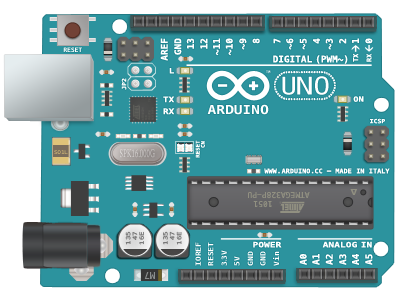
<style>
.page{position:relative;width:400px;height:300px;background:#2c939e}
.page>*{position:absolute;margin:0}
.t1{font:9.3px "Menlo-Bold";color:#ffffff}
.t2{font:6.2px "Menlo-Bold";color:#ffffff}
.t3{font:6.8px "Menlo-Bold";color:#ffffff}
.t4{font:5.8px "Menlo-Bold";color:#ffffff;scale:1.12 1}
.t5{font:7.2px "Menlo-Bold";color:#ffffff;scale:1.21 1}
.t6{font:3.7px "Menlo-Bold"}
.t7{font:24.4px "Menlo-Regular";color:#ffffff;scale:1.12 1}
.t8{font:2.5px "Menlo-Regular";color:#545552}
.t9{font:7.8px "Menlo-Bold";color:#ffffff;scale:1.2 1}
.t10{font:2.5px "Menlo-Regular";color:#575855}
.t11{font:2.5px "Menlo-Regular";color:#525250}
.t12{font:12.3px "Menlo-Bold";color:#ffffff;scale:1.19 1}
.t13{font:2.5px "Menlo-Regular";color:#545451}
.t14{font:5px "Menlo-Regular";scale:1.15 1}
.t15{font:11.8px "MinionPro-Regular";scale:0.59 1}
.t16{font:5.1px "Menlo-Bold";color:#ffffff;scale:1.12 1}
.t17{font:6.4px "Menlo-Bold";color:#ffffff;scale:1.07 1}
.t18{font:7.9px "Menlo-Regular";color:#919081}
.t19{font:5.7px "Menlo-Regular";scale:1.27 1}
.t20{font:7.2px "Menlo-Bold";color:#ffffff;scale:1.1 1}
.t21{font:7.5px "Menlo-Bold";color:#ffffff;scale:1.28 1}
.t22{font:8.8px "Menlo-Regular";color:#8a8e8e}
</style>
<div class="page">
<p class="t1" style="left:160px;top:38px;width:8px;height:23px;rotate:-90deg">AREF</p>
<p class="t1" style="left:174px;top:38px;width:8px;height:17px;rotate:-90deg">GND</p>
<p class="t1" style="left:186px;top:38px;width:8px;height:11px;rotate:-90deg">13</p>
<p class="t1" style="left:200px;top:38px;width:8px;height:11px;rotate:-90deg">12</p>
<p class="t1" style="left:213px;top:38px;width:7px;height:18px;rotate:-90deg">~11</p>
<p class="t1" style="left:225px;top:38px;width:8px;height:18px;rotate:-90deg">~10</p>
<p class="t1" style="left:239px;top:38px;width:8px;height:12px;rotate:-90deg">~9</p>
<p class="t1" style="left:252px;top:38px;width:8px;height:6px;rotate:-90deg">8</p>
<p class="t1" style="left:273px;top:38px;width:8px;height:6px;rotate:-90deg">7</p>
<p class="t1" style="left:286px;top:38px;width:8px;height:12px;rotate:-90deg">~6</p>
<p class="t1" style="left:299px;top:38px;width:8px;height:12px;rotate:-90deg">~5</p>
<p class="t1" style="left:313px;top:38px;width:7px;height:6px;rotate:-90deg">4</p>
<p class="t1" style="left:325px;top:38px;width:8px;height:12px;rotate:-90deg">~3</p>
<p class="t1" style="left:339px;top:38px;width:8px;height:6px;rotate:-90deg">2</p>
<p class="t1" style="left:352px;top:38px;width:7px;height:5px;rotate:-90deg">1</p>
<p class="t1" style="left:365px;top:38px;width:8px;height:6px;rotate:-90deg">0</p>
<p class="t2" style="left:63px;top:47px;width:19px;height:5px">RESET</p>
<p class="t3" style="left:353px;top:53px;width:6px;height:9px;rotate:-90deg">TX</p>
<p class="t3" style="left:366px;top:53px;width:6px;height:9px;rotate:-90deg">RX</p>
<p class="t1" style="left:273px;top:55px;width:39px;height:8px">DIGITAL</p>
<p class="t1" style="left:316px;top:55px;width:32px;height:9px">(PWM~)</p>
<p class="t4" style="left:121px;top:78px;width:6px;height:12px;rotate:-90deg">JP2</p>
<p class="t5" style="left:169px;top:68px;width:5px;height:6px">L</p>
<p class="t6" style="left:266px;top:70px;width:5px;height:4px">TM</p>
<p class="t7" style="left:282px;top:76px;width:47px;height:19px">UNO</p>
<p class="t8" style="left:148px;top:98px;width:3px;height:22px;rotate:-90deg">ROBOTS      TM</p>
<p class="t9" style="left:163px;top:96px;width:12px;height:7px">TX</p>
<p class="t5" style="left:353px;top:96px;width:11px;height:6px">ON</p>
<p class="t10" style="left:141px;top:107px;width:3px;height:14px;rotate:-90deg">MEGA32U4</p>
<p class="t11" style="left:151px;top:107px;width:3px;height:13px;rotate:-90deg">BIG DATA</p>
<p class="t9" style="left:163px;top:108px;width:12px;height:7px">RX</p>
<p class="t12" style="left:207px;top:104px;width:62px;height:11px">ARDUINO</p>
<p class="t13" style="left:145px;top:115px;width:3px;height:5px;rotate:-90deg">RBD</p>
<p class="t4" style="left:370px;top:118px;width:15px;height:6px">ICSP</p>
<p class="t14" style="left:54px;top:150px;width:14px;height:4px">SO1L</p>
<p class="t15" style="left:120px;top:149px;width:35px;height:9px">SPK16.000G</p>
<p class="t16" style="left:195px;top:140px;width:5px;height:18px;rotate:-90deg">RESET</p>
<p class="t16" style="left:200px;top:141px;width:5px;height:7px;rotate:-90deg">CN</p>
<p class="t17" style="left:264px;top:168px;width:13px;height:6px">WWW</p>
<p class="t17" style="left:281px;top:168px;width:30px;height:6px">ARDUINO</p>
<p class="t17" style="left:314px;top:168px;width:9px;height:6px">CC</p>
<p class="t17" style="left:335px;top:168px;width:17px;height:6px">MADE</p>
<p class="t17" style="left:356px;top:168px;width:9px;height:6px">IN</p>
<p class="t17" style="left:369px;top:168px;width:21px;height:6px">ITALY</p>
<p class="t18" style="left:248px;top:192px;width:62px;height:7px;rotate:180deg">ATMEGA328P-PU</p>
<p class="t18" style="left:253px;top:201px;width:19px;height:7px;rotate:180deg">1051</p>
<p class="t19" style="left:125px;top:231px;width:19px;height:14px;text-align:right;rotate:-90deg">135<br>47<br>16E</p>
<p class="t19" style="left:163px;top:231px;width:19px;height:14px;text-align:right;rotate:-90deg">135<br>47<br>16E</p>
<p class="t20" style="left:195px;top:242px;width:6px;height:24px;rotate:-90deg">IOREF</p>
<p class="t20" style="left:208px;top:242px;width:6px;height:24px;rotate:-90deg">RESET</p>
<p class="t21" style="left:253px;top:241px;width:29px;height:7px">POWER</p>
<p class="t21" style="left:322px;top:241px;width:35px;height:7px">ANALOG</p>
<p class="t21" style="left:361px;top:241px;width:11px;height:7px">IN</p>
<p class="t20" style="left:221px;top:250px;width:6px;height:10px;rotate:-90deg">3V</p>
<p class="t20" style="left:234px;top:256px;width:6px;height:10px;rotate:-90deg">5V</p>
<p class="t20" style="left:247px;top:251px;width:6px;height:15px;rotate:-90deg">GND</p>
<p class="t20" style="left:260px;top:251px;width:6px;height:15px;rotate:-90deg">GND</p>
<p class="t20" style="left:273px;top:251px;width:6px;height:15px;rotate:-90deg">Vin</p>
<p class="t1" style="left:299px;top:254px;width:8px;height:11px;rotate:-90deg">A0</p>
<p class="t1" style="left:312px;top:254px;width:8px;height:11px;rotate:-90deg">A1</p>
<p class="t1" style="left:325px;top:254px;width:8px;height:11px;rotate:-90deg">A2</p>
<p class="t1" style="left:339px;top:254px;width:8px;height:11px;rotate:-90deg">A3</p>
<p class="t1" style="left:352px;top:254px;width:7px;height:11px;rotate:-90deg">A4</p>
<p class="t1" style="left:365px;top:254px;width:8px;height:11px;rotate:-90deg">A5</p>
<p class="t20" style="left:221px;top:261px;width:6px;height:5px;rotate:-90deg">3</p>
<p class="t22" style="left:144px;top:272px;width:11px;height:7px;rotate:180deg">M7</p>
</div>
